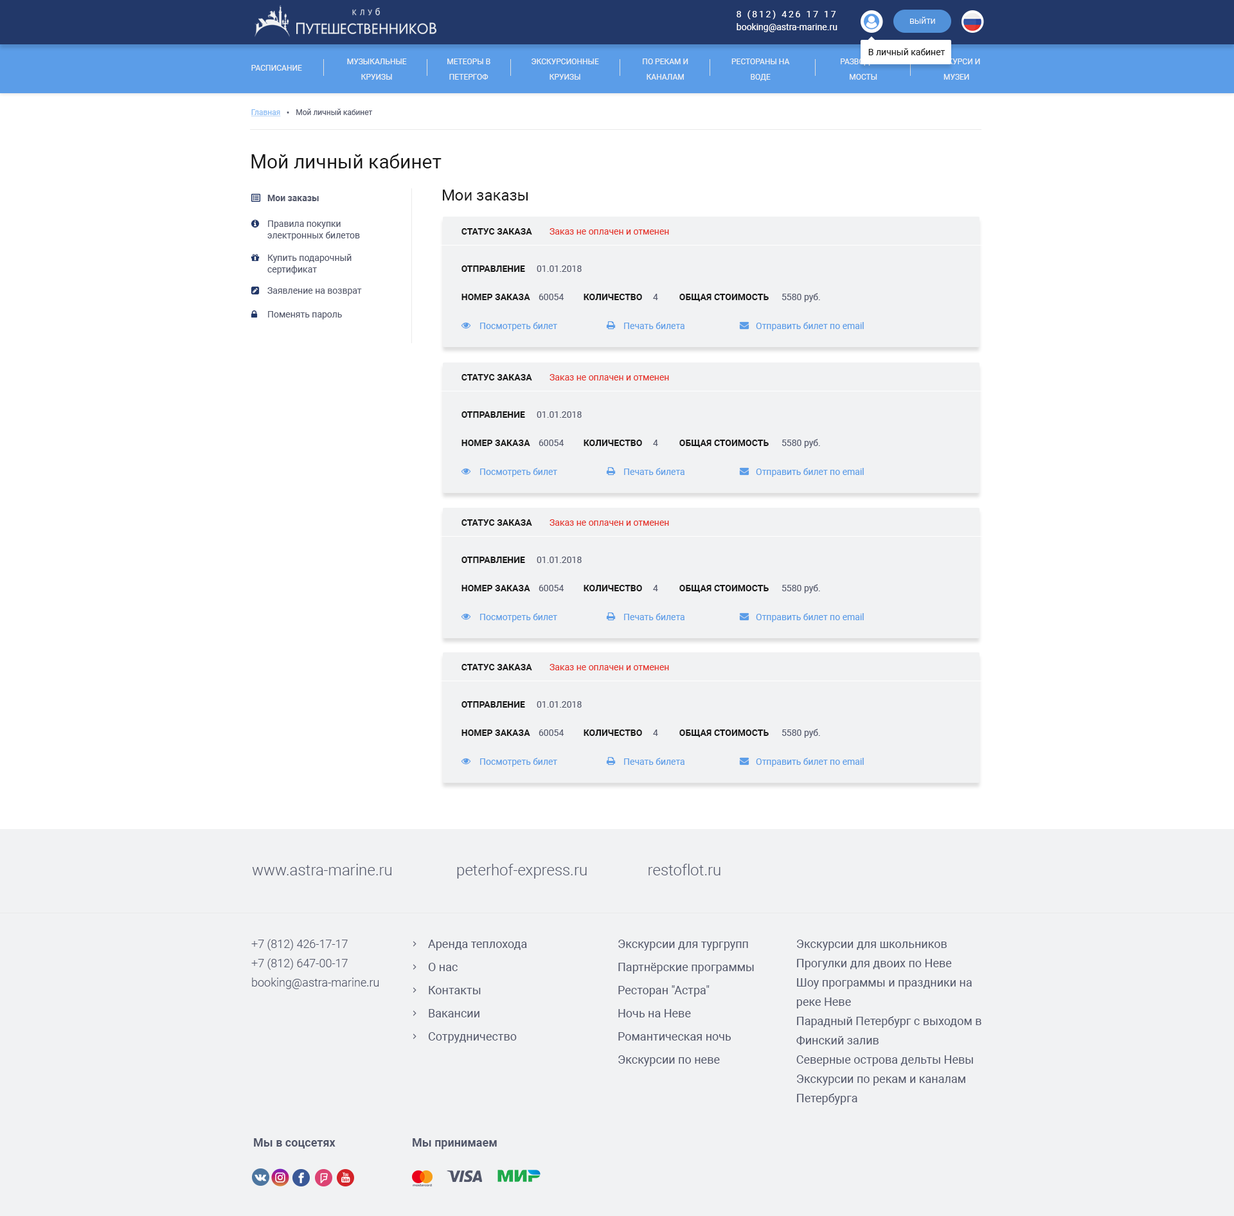
<style>
.page{position:relative;width:1234px;height:1216px;background:#f1f2f3}
.page>*{position:absolute;margin:0}
.t1{font:9px "Roboto-Regular";letter-spacing:0.2em;color:#ffffff}
.t2{font:9px "Roboto-Light";color:#ffffff}
.t3{font:9px "Roboto-Regular";color:#ffffff}
.t4{font:9px "Roboto-Regular";color:#191919}
.t5{font:7.7px "Roboto-Regular";color:#f1f2f3;text-transform:uppercase}
.t6{font:7.7px/15.4px "Roboto-Regular";color:#f1f2f3;text-transform:uppercase}
.t7{font:7.7px "Roboto-Regular";color:#52576a}
.t8{font:7.7px "Roboto-Regular";color:#85b9f3;text-decoration:underline}
.t9{font:19.3px "Roboto-Regular";color:#191919}
.t10{font:9px "Roboto-Bold";color:#52576a}
.t11{font:15.4px "Roboto-Regular";color:#191919}
.t12{font:9px/11.6px "Roboto-Regular";color:#52576a}
.t13{font:9px "Roboto-Bold";color:#191919;text-transform:uppercase}
.t14{font:9px "Roboto-Regular";color:#e53027}
.t15{font:9px "Roboto-Regular";color:#52576a}
.t16{font:9px "Roboto-Regular";color:#5b9de8}
.t17{font:15.4px "Roboto-Light";color:#515669}
.t18{font:11.6px/19.3px "Roboto-Light";color:#515669}
.t19{font:11.6px/23.1px "Roboto-Regular";color:#515669}
.t20{font:11.6px/19.3px "Roboto-Regular";color:#515669}
.t21{font:11.6px "Roboto-Bold";color:#515669}
</style>
<div class="page">
<p class="t1" style="left:737px;top:10px;width:99px;height:9px">8 (812) 426 17 17</p>
<p class="t2" style="left:910px;top:17px;width:25px;height:7px">выйти</p>
<p class="t3" style="left:737px;top:23px;width:101px;height:9px">booking@astra-marine.ru</p>
<p class="t4" style="left:869px;top:48px;width:77px;height:7px">В личный кабинет</p>
<p class="t5" style="left:251px;top:65px;width:51px;height:6px">Расписание</p>
<p class="t6" style="left:347px;top:59px;width:60px;height:21px;text-align:center">музыкальные<br>круизы</p>
<p class="t6" style="left:447px;top:59px;width:44px;height:21px;text-align:center">метеоры в петергоф</p>
<p class="t6" style="left:532px;top:59px;width:67px;height:21px;text-align:center">экскурсионные круизы</p>
<p class="t6" style="left:643px;top:59px;width:45px;height:21px;text-align:center">по рекам и каналам</p>
<p class="t6" style="left:732px;top:59px;width:58px;height:22px;text-align:center">рестораны на воде</p>
<p class="t6" style="left:841px;top:59px;width:46px;height:21px;text-align:center">разводные мосты</p>
<p class="t6" style="left:933px;top:59px;width:47px;height:21px;text-align:center">экскурси и музеи</p>
<p class="t7" style="left:251px;top:109px;width:122px;height:8px"><span class="t8">Главная      </span>  Мой личный кабинет</p>
<p class="t9" style="left:251px;top:154px;width:191px;height:14px">Мой личный кабинет</p>
<p class="t10" style="left:267px;top:195px;width:52px;height:6px">Мои заказы</p>
<p class="t11" style="left:443px;top:190px;width:85px;height:11px">Мои заказы</p>
<p class="t12" style="left:267px;top:221px;width:93px;height:19px">Правила покупки <br>электронных билетов</p>
<p class="t13" style="left:462px;top:228px;width:70px;height:7px">Статус заказа</p>
<p class="t14" style="left:550px;top:228px;width:119px;height:7px">Заказ не оплачен и отменен</p>
<p class="t12" style="left:267px;top:254px;width:85px;height:20px">Купить подарочный<br>сертификат</p>
<p class="t13" style="left:462px;top:266px;width:63px;height:6px">Отправление</p>
<p class="t15" style="left:537px;top:266px;width:45px;height:6px">01.01.2018</p>
<p class="t15" style="left:267px;top:287px;width:95px;height:9px">Заявление на возврат</p>
<p class="t13" style="left:462px;top:294px;width:68px;height:6px">номер заказа</p>
<p class="t15" style="left:539px;top:294px;width:25px;height:6px">60054</p>
<p class="t13" style="left:584px;top:294px;width:58px;height:6px">количество</p>
<p class="t15" style="left:653px;top:294px;width:5px;height:6px">4</p>
<p class="t13" style="left:680px;top:294px;width:89px;height:8px">общая стоимость</p>
<p class="t15" style="left:782px;top:293px;width:38px;height:9px">5580 руб.</p>
<p class="t15" style="left:268px;top:311px;width:74px;height:9px">Поменять пароль</p>
<p class="t16" style="left:480px;top:322px;width:77px;height:9px">Посмотреть билет</p>
<p class="t16" style="left:624px;top:322px;width:61px;height:7px">Печать билета</p>
<p class="t16" style="left:756px;top:322px;width:108px;height:9px">Отправить билет по email</p>
<p class="t13" style="left:462px;top:374px;width:70px;height:7px">Статус заказа</p>
<p class="t14" style="left:550px;top:374px;width:119px;height:7px">Заказ не оплачен и отменен</p>
<p class="t13" style="left:462px;top:411px;width:63px;height:7px">Отправление</p>
<p class="t15" style="left:537px;top:411px;width:45px;height:7px">01.01.2018</p>
<p class="t13" style="left:462px;top:440px;width:68px;height:6px">номер заказа</p>
<p class="t15" style="left:539px;top:440px;width:25px;height:6px">60054</p>
<p class="t13" style="left:584px;top:440px;width:58px;height:6px">количество</p>
<p class="t15" style="left:653px;top:440px;width:5px;height:6px">4</p>
<p class="t13" style="left:680px;top:440px;width:89px;height:7px">общая стоимость</p>
<p class="t15" style="left:782px;top:439px;width:38px;height:9px">5580 руб.</p>
<p class="t16" style="left:480px;top:468px;width:77px;height:9px">Посмотреть билет</p>
<p class="t16" style="left:624px;top:468px;width:61px;height:7px">Печать билета</p>
<p class="t16" style="left:756px;top:468px;width:108px;height:9px">Отправить билет по email</p>
<p class="t13" style="left:462px;top:519px;width:70px;height:7px">Статус заказа</p>
<p class="t14" style="left:550px;top:519px;width:119px;height:7px">Заказ не оплачен и отменен</p>
<p class="t13" style="left:462px;top:557px;width:63px;height:6px">Отправление</p>
<p class="t15" style="left:537px;top:557px;width:45px;height:6px">01.01.2018</p>
<p class="t13" style="left:462px;top:585px;width:68px;height:6px">номер заказа</p>
<p class="t15" style="left:539px;top:585px;width:25px;height:6px">60054</p>
<p class="t13" style="left:584px;top:585px;width:58px;height:6px">количество</p>
<p class="t15" style="left:653px;top:585px;width:5px;height:6px">4</p>
<p class="t13" style="left:680px;top:585px;width:89px;height:8px">общая стоимость</p>
<p class="t15" style="left:782px;top:584px;width:38px;height:9px">5580 руб.</p>
<p class="t16" style="left:480px;top:613px;width:77px;height:9px">Посмотреть билет</p>
<p class="t16" style="left:624px;top:613px;width:61px;height:7px">Печать билета</p>
<p class="t16" style="left:756px;top:613px;width:108px;height:9px">Отправить билет по email</p>
<p class="t13" style="left:462px;top:664px;width:70px;height:6px">Статус заказа</p>
<p class="t14" style="left:550px;top:664px;width:119px;height:6px">Заказ не оплачен и отменен</p>
<p class="t13" style="left:462px;top:701px;width:63px;height:7px">Отправление</p>
<p class="t15" style="left:537px;top:701px;width:45px;height:7px">01.01.2018</p>
<p class="t13" style="left:462px;top:730px;width:68px;height:6px">номер заказа</p>
<p class="t15" style="left:539px;top:730px;width:25px;height:6px">60054</p>
<p class="t13" style="left:584px;top:730px;width:58px;height:6px">количество</p>
<p class="t15" style="left:653px;top:730px;width:5px;height:6px">4</p>
<p class="t13" style="left:680px;top:730px;width:89px;height:7px">общая стоимость</p>
<p class="t15" style="left:782px;top:729px;width:38px;height:9px">5580 руб.</p>
<p class="t16" style="left:480px;top:758px;width:77px;height:9px">Посмотреть билет</p>
<p class="t16" style="left:624px;top:758px;width:61px;height:7px">Печать билета</p>
<p class="t16" style="left:756px;top:758px;width:108px;height:9px">Отправить билет по email</p>
<p class="t17" style="left:252px;top:864px;width:469px;height:15px">www.astra-marine.ru                 peterhof-express.ru                restoflot.ru</p>
<p class="t18" style="left:251px;top:939px;width:128px;height:50px">+7 (812) 426-17-17<br>+7 (812) 647-00-17<br>booking@astra-marine.ru</p>
<p class="t19" style="left:428px;top:940px;width:99px;height:103px">Аренда теплохода<br>О нас<br>Контакты<br>Вакансии<br>Сотрудничество</p>
<p class="t19" style="left:618px;top:940px;width:136px;height:126px">Экскурсии для тургрупп<br>Партнёрские программы<br>Ресторан "Астра"<br>Ночь на Неве<br>Романтическая ночь<br>Экскурсии по неве</p>
<p class="t20" style="left:797px;top:940px;width:185px;height:165px">Экскурсии для школьников<br>Прогулки для двоих по Неве<br>Шоу программы и праздники на реке Неве<br>Парадный Петербург с выходом в Финский залив<br>Северные острова дельты Невы<br>Экскурсии по рекам и каналам Петербурга</p>
<p class="t21" style="left:254px;top:1138px;width:82px;height:11px">Мы в соцсетях</p>
<p class="t21" style="left:413px;top:1138px;width:84px;height:11px">Мы принимаем</p>
</div>
